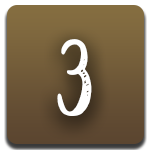
<style>
.page{position:relative;width:150px;height:150px}
.page>*{position:absolute;margin:0}
.t1{font:130.1px "BlackParadePersonalUse";color:#ffffff}
</style>
<div class="page">
<p class="t1" style="left:57px;top:39px;width:35px;height:77px">3</p>
</div>
